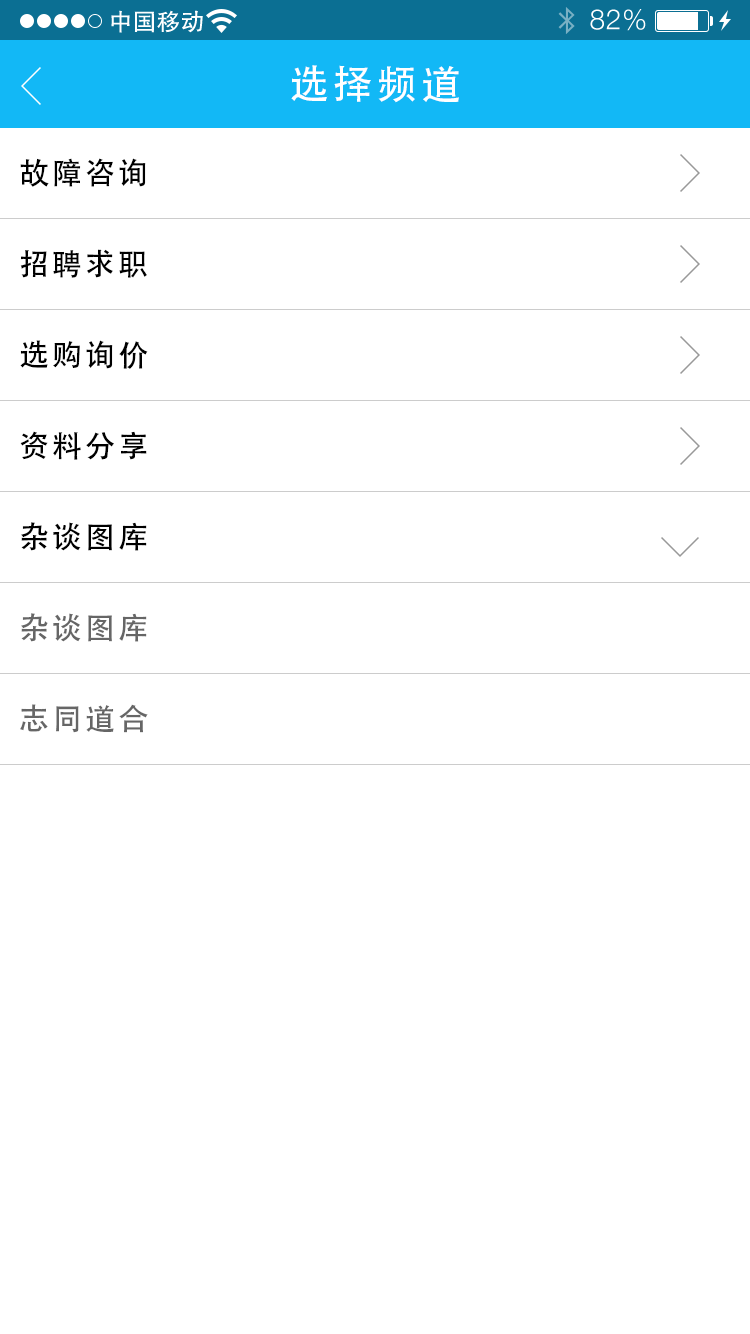
<style>
.page{position:relative;width:750px;height:1334px;background:#ffffff}
.page>*{position:absolute;margin:0}
.t1{font:40px "AdobeHeitiStd-Regular";letter-spacing:0.104em;color:#ffffff}
.t2{font:30px "AdobeHeitiStd-Regular";letter-spacing:0.104em;color:#000000}
.t3{font:30px "AdobeHeitiStd-Regular";letter-spacing:0.104em;color:#666666}
</style>
<div class="page">
<p class="t1" style="left:291px;top:65px;width:168px;height:38px">选择频道</p>
<p class="t2" style="left:20px;top:158px;width:126px;height:29px">故障咨询</p>
<p class="t2" style="left:20px;top:249px;width:127px;height:29px">招聘求职</p>
<p class="t2" style="left:20px;top:340px;width:128px;height:29px">选购询价</p>
<p class="t2" style="left:20px;top:431px;width:127px;height:29px">资料分享</p>
<p class="t2" style="left:21px;top:522px;width:126px;height:29px">杂谈图库</p>
<p class="t3" style="left:21px;top:613px;width:126px;height:29px">杂谈图库</p>
<p class="t3" style="left:20px;top:704px;width:128px;height:29px">志同道合</p>
</div>
